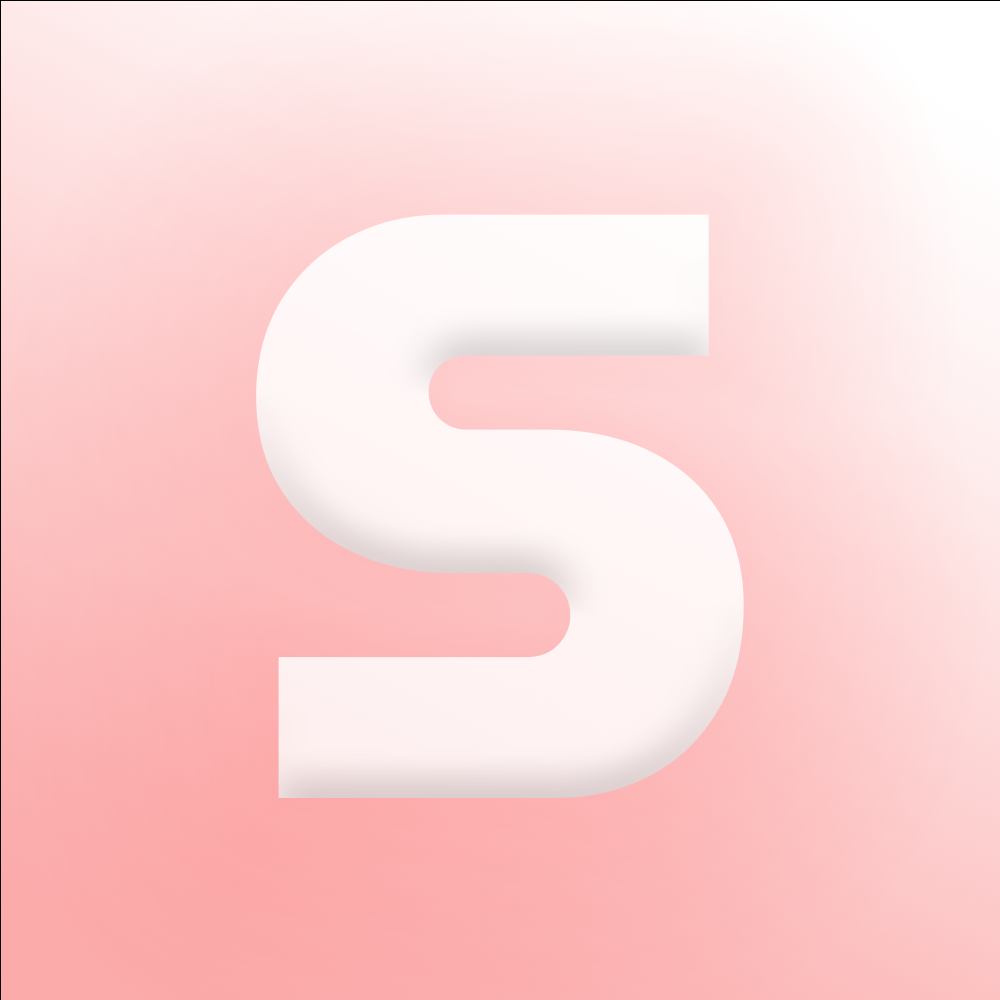
<style>
.page{position:relative;width:1000px;height:1000px}
.page>*{position:absolute;margin:0}
.t1{font:833.3px "MuseoModerno-Black";letter-spacing:0.01em;color:#ffffff}
</style>
<div class="page">
<p class="t1" style="left:256px;top:214px;width:488px;height:584px;opacity:0.76">S</p>
</div>
